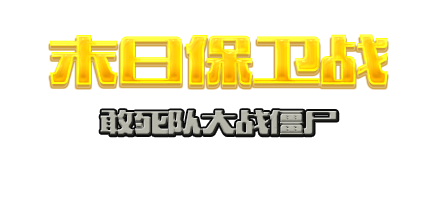
<style>
.page{position:relative;width:442px;height:200px;background:#ffffff}
.page>*{position:absolute;margin:0}
.t1{font:72px "MFWenYan_Noncommercial-Regular";letter-spacing:-0.06em}
.t2{font:36px "MFWenYan_Noncommercial-Regular";letter-spacing:-0.06em;color:#b6b6aa}
</style>
<div class="page">
<p class="t1" style="left:50px;top:34px;width:338px;height:51px">末日保卫战</p>
<p class="t2" style="left:100px;top:110px;width:238px;height:26px">敢死队大战僵尸</p>
</div>
